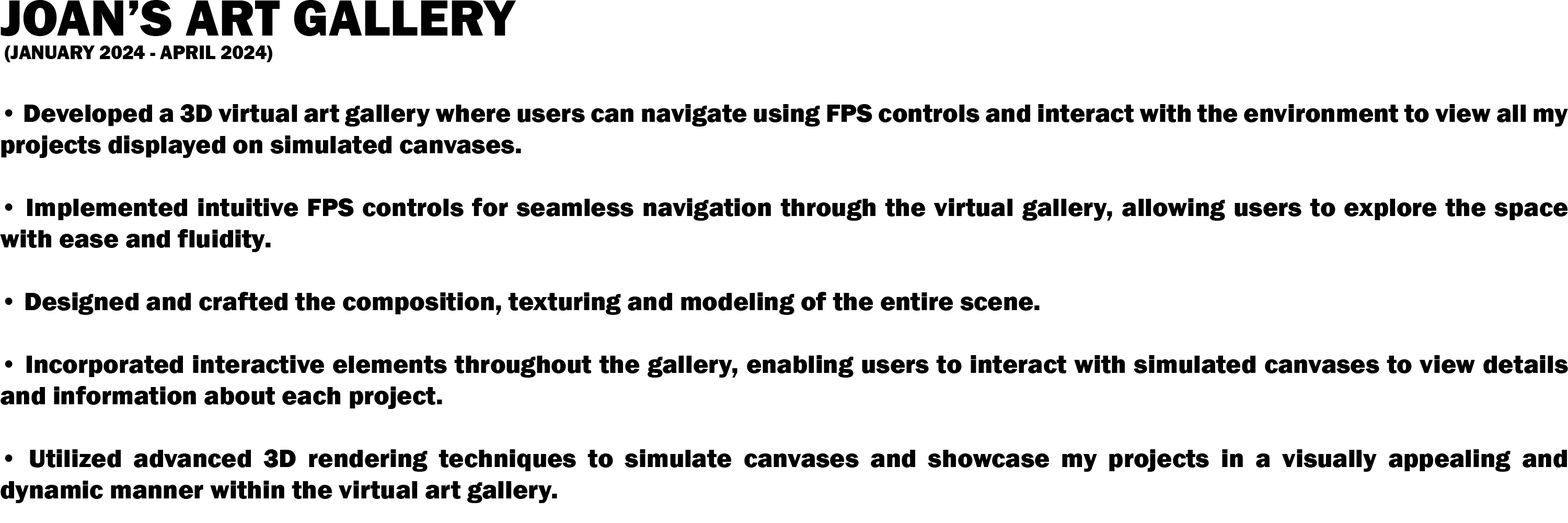
<style>
.page{position:relative;width:1568px;height:523px;background:#ffffff}
.page>*{position:absolute;margin:0}
.t1{font:26.1px "FranklinGothic-Heavy";color:#000000}
.t2{font:52.3px "FranklinGothic-Heavy";color:#000000}
.t3{font:19.6px "FranklinGothic-Heavy";color:#000000}
</style>
<div class="page">
<p class="t1" style="left:0px;top:0px;width:1568px;height:503px"><span class="t2">JOAN’S ART GALLERY<br></span><span class="t3"> (JANUARY 2024 - APRIL 2024)<br></span><br>• Developed a 3D virtual art gallery where users can navigate using FPS controls and interact with the environment to view all my projects displayed on simulated canvases.<br><br>• Implemented intuitive FPS controls for seamless navigation through the virtual gallery, allowing users to explore the space with ease and fluidity.<br><br>• Designed and crafted the composition, texturing and modeling of the entire scene.<br><br>• Incorporated interactive elements throughout the gallery, enabling users to interact with simulated canvases to view details and information about each project.<br><br>• Utilized advanced 3D rendering techniques to simulate canvases and showcase my projects in a visually appealing and dynamic manner within the virtual art gallery.</p>
</div>
